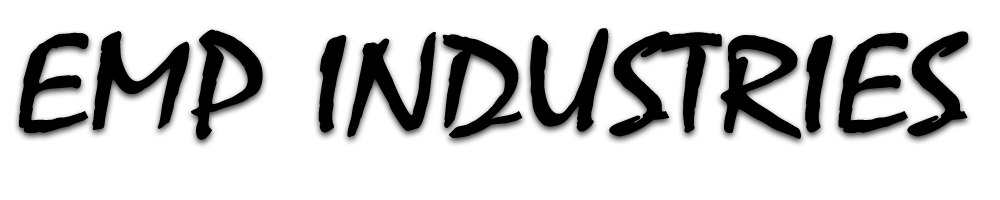
<style>
.page{position:relative;width:1000px;height:200px;background:#ffffff}
.page>*{position:absolute;margin:0}
.t1{font:141.5px "Mistral";color:#000000;scale:1.22 1}
</style>
<div class="page">
<p class="t1" style="left:19px;top:28px;width:950px;height:112px">EMP INDUSTRIES</p>
</div>
